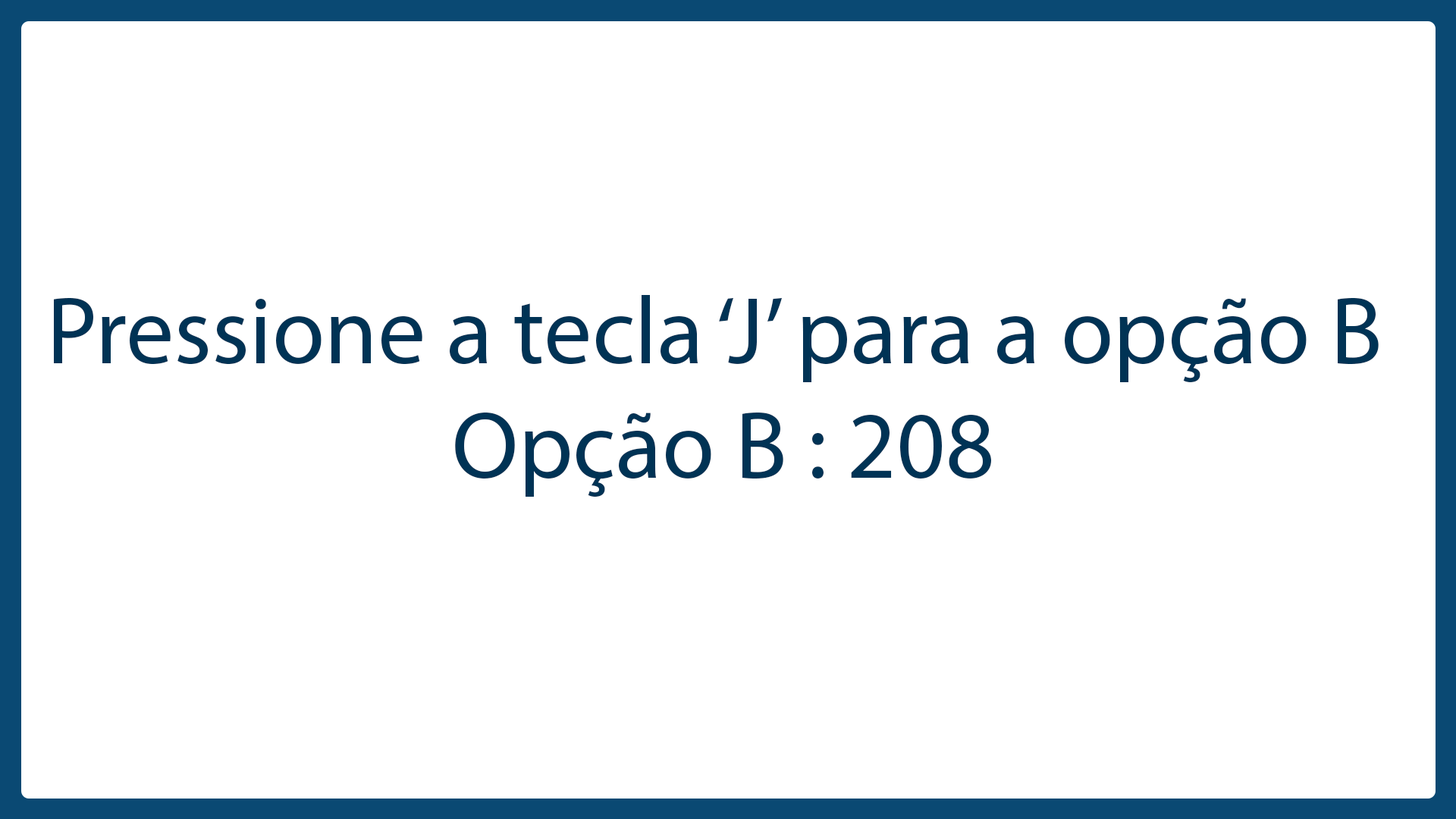
<style>
.page{position:relative;width:1456px;height:819px;background:#ffffff}
.page>*{position:absolute;margin:0}
.t1{font:95.9px "MyriadPro-Regular";color:#003355}
</style>
<div class="page">
<p class="t1" style="left:54px;top:295px;width:1325px;height:202px">Pressione a tecla ‘J’ para a opção B<br>                    Opção B : 208</p>
</div>
